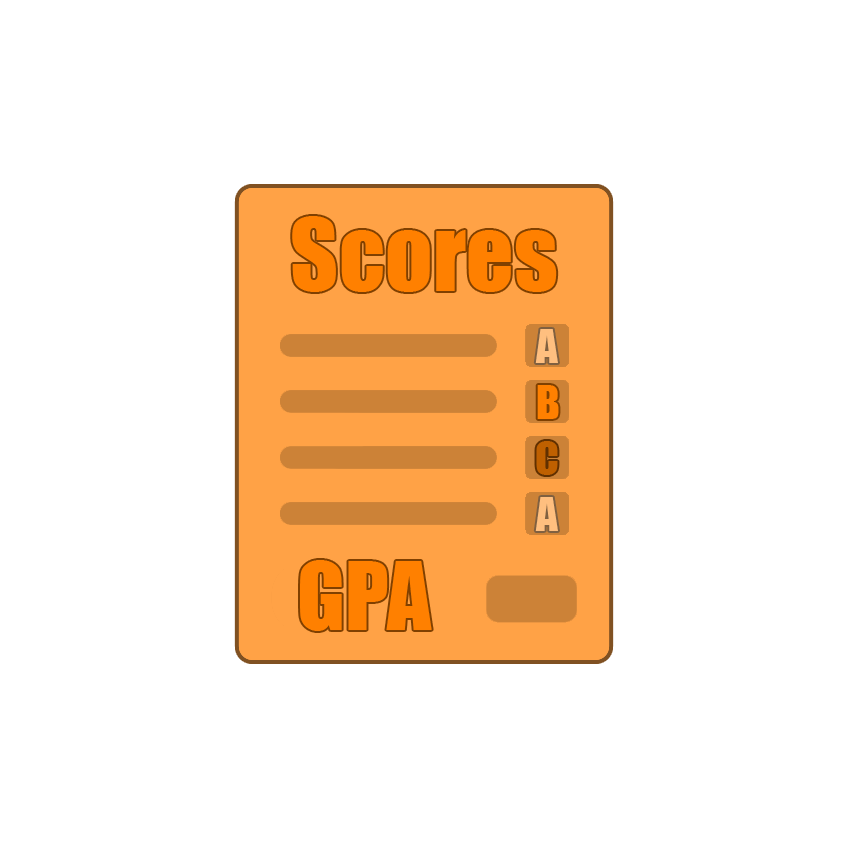
<style>
.page{position:relative;width:848px;height:848px;background:#ffffff}
.page>*{position:absolute;margin:0}
.t1{font:93.3px "Impact";color:#ff8000}
.t2{font:42.7px "Impact";color:#ffbf7f}
.t3{font:42.7px "Impact";color:#ff8000}
.t4{font:42.7px "Impact";color:#bf6000}
.t5{font:86.7px "Impact";color:#ff8000}
</style>
<div class="page">
<p class="t1" style="left:292px;top:216px;width:265px;height:76px">Scores</p>
<p class="t2" style="left:535px;top:329px;width:23px;height:34px">A</p>
<p class="t3" style="left:537px;top:385px;width:22px;height:34px">B</p>
<p class="t4" style="left:536px;top:441px;width:22px;height:34px">C</p>
<p class="t2" style="left:535px;top:497px;width:23px;height:34px">A</p>
<p class="t5" style="left:300px;top:560px;width:132px;height:71px">GPA</p>
</div>
